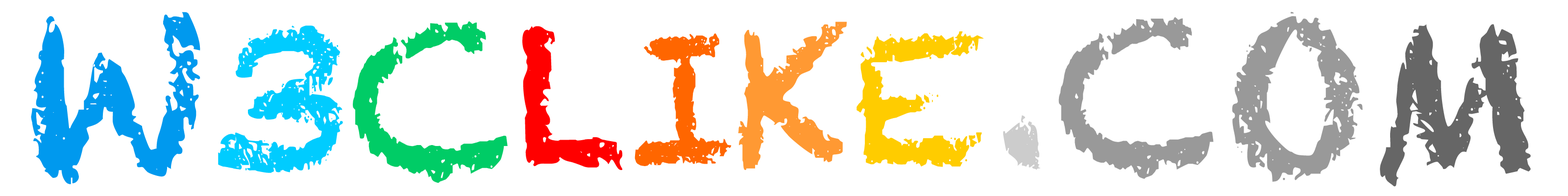
<style>
.page{position:relative;width:1568px;height:196px;background:#ffffff}
.page>*{position:absolute;margin:0}
.t1{font:204.2px "Chalkduster";color:#0099ee}
.t2{font:204.2px "Chalkduster";color:#00ccff}
.t3{font:204.2px "Chalkduster";color:#00cc66}
.t4{font:204.2px "Chalkduster";color:#999999}
.t5{font:204.2px "Chalkduster";color:#666666}
.t6{font:179.7px "Chalkduster";color:#ff0000}
.t7{font:179.7px "Chalkduster";color:#ff6600}
.t8{font:179.7px "Chalkduster";color:#ff9933}
.t9{font:179.7px "Chalkduster";color:#ffcc00}
.t10{font:204.2px "Chalkduster";color:#cccccc}
</style>
<div class="page">
<p class="t1" style="left:31px;top:12px;width:477px;height:172px">W<span class="t2">3</span><span class="t3">C</span></p>
<p class="t4" style="left:1058px;top:12px;width:473px;height:175px">CO<span class="t5">M</span></p>
<p class="t6" style="left:522px;top:22px;width:462px;height:148px">L<span class="t7">I</span><span class="t8">K</span><span class="t9">E</span></p>
<p class="t10" style="left:1003px;top:115px;width:37px;height:55px">.</p>
</div>
